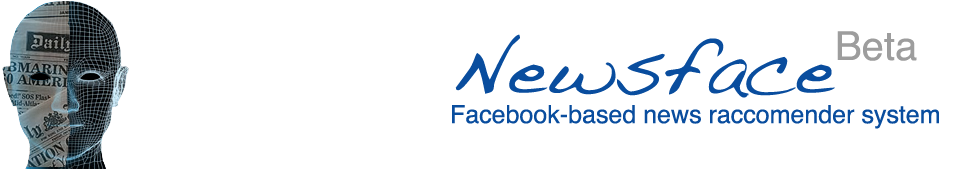
<style>
.page{position:relative;width:953px;height:170px;background:#ffffff}
.page>*{position:absolute;margin:0}
.t1{font:25px "Helvetica";color:#094d9e}
.t2{font:80px "Handwriting-Dakota";color:#094d9e}
.t3{font:40px "Helvetica";color:#9d9d9d}
</style>
<div class="page">
<p class="t1" style="left:452px;top:34px;width:487px;height:95px"><span class="t2">Newsface<br></span>Facebook-based news raccomender system</p>
<p class="t3" style="left:837px;top:31px;width:80px;height:30px">Beta</p>
</div>
